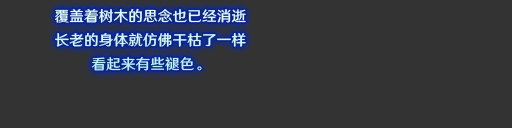
<style>
.page{position:relative;width:512px;height:128px;background:#333333}
.page>*{position:absolute;margin:0}
.t1{font:14.7px/24px "HYWenHei-FEW";letter-spacing:0.005em;color:#cef7ff}
</style>
<div class="page">
<p class="t1" style="left:55px;top:8px;width:191px;height:63px;text-align:center">覆盖着树木的思念也已经消逝<br>长老的身体就仿佛干枯了一样<br>看起来有些褪色。</p>
</div>
